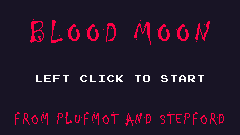
<style>
.page{position:relative;width:240px;height:135px;background:#181425}
.page>*{position:absolute;margin:0}
.t1{font:32px "Chiller-Regular";letter-spacing:0.125em;color:#ff0044}
.t2{font:8px "PressStart2P";letter-spacing:0.125em;color:#ffffff}
.t3{font:16px "Chiller-Regular";letter-spacing:0.125em;color:#ff0044}
</style>
<div class="page">
<p class="t1" style="left:30px;top:19px;width:180px;height:26px">BLOOD MOON</p>
<p class="t2" style="left:36px;top:75px;width:168px;height:7px">LEFT CLICK TO START</p>
<p class="t3" style="left:15px;top:112px;width:209px;height:14px">FROM PLUFMOT AND STEPFORD</p>
</div>
